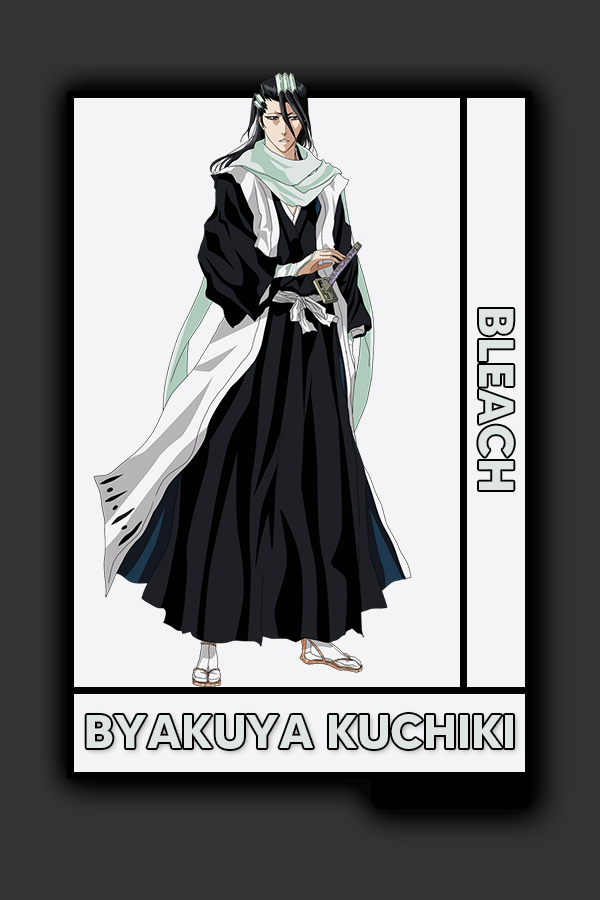
<style>
.page{position:relative;width:600px;height:900px;background:#f4f3f5}
.page>*{position:absolute;margin:0}
.t1{font:48.8px "MADETOMMY-Bold";color:#dfe5e3}
.t2{font:47.4px "MADETOMMY-Bold";color:#dfe5e3}
</style>
<div class="page">
<p class="t1" style="left:478px;top:309px;width:36px;height:181px;rotate:90deg">BLEACH</p>
<p class="t2" style="left:86px;top:714px;width:427px;height:35px">BYAKUYA KUCHIKI</p>
</div>
